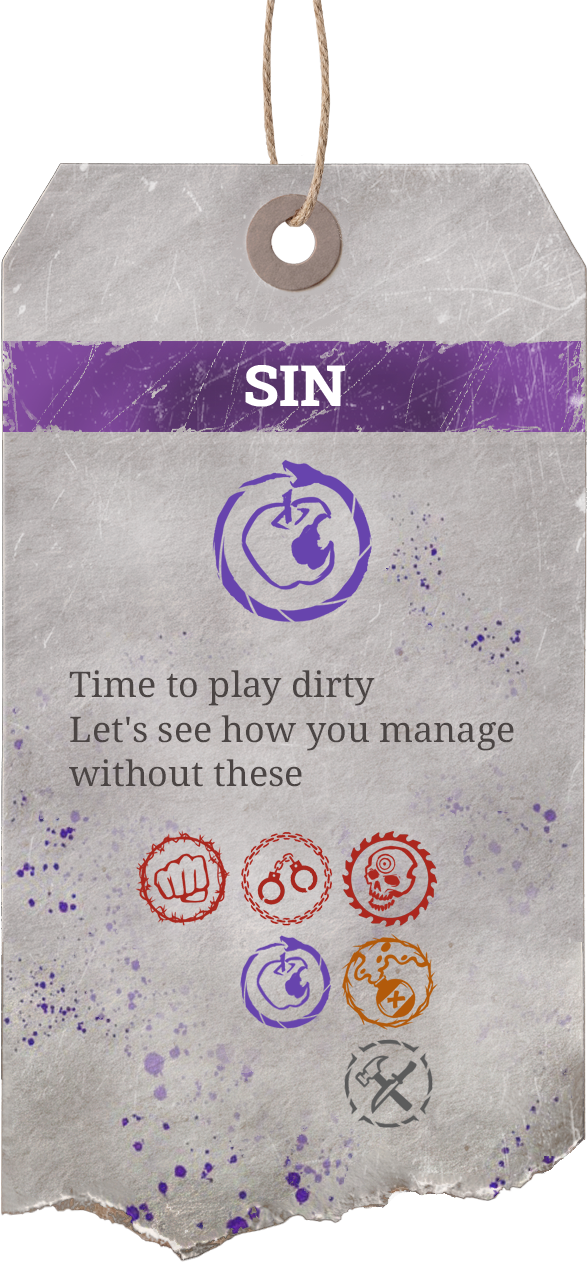
<style>
.page{position:relative;width:587px;height:1262px}
.page>*{position:absolute;margin:0}
.t1{font:57.1px "RobotoSlab-ExtraBold";color:#ffffff}
.t2{font:35.3px/44.6px "NotoSerif-Medium";color:#4b4544}
</style>
<div class="page">
<p class="t1" style="left:245px;top:365px;width:100px;height:42px">SIN</p>
<p class="t2" style="left:69px;top:670px;width:445px;height:117px">Time to play dirty<br>Let's see how you manage without these</p>
</div>
